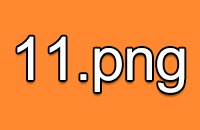
<style>
.page{position:relative;width:200px;height:130px;background:#ff8830}
.page>*{position:absolute;margin:0}
.t1{font:60px "ArialMT";letter-spacing:-0.02em;color:#ffffff}
</style>
<div class="page">
<p class="t1" style="left:17px;top:36px;width:168px;height:57px">11.png</p>
</div>
